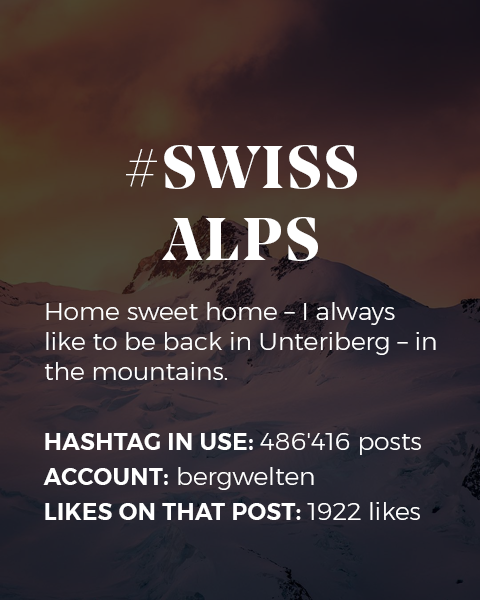
<style>
.page{position:relative;width:480px;height:600px}
.page>*{position:absolute;margin:0}
.t1{font:25px "Montserrat-Light";color:#ffffff}
.t2{font:60px "NoeDisplay-Bold";letter-spacing:0.05em;color:#ffffff;text-transform:uppercase}
.t3{font:23px/35px "Montserrat-SemiBold";letter-spacing:0.02em;color:#ffffff;text-transform:uppercase}
.t4{font:25px/35px "Montserrat-Light";color:#ffffff}
</style>
<div class="page">
<p class="t1" style="left:43px;top:145px;width:393px;height:375px;text-align:center"><span class="t2">#swiss<br>alps<br></span><br>Home sweet home – I always like to be back in Unteriberg – in the mountains. <br><br><span class="t3">Hashtag in Use: </span><span class="t4">486'416 posts<br></span><span class="t3">Account:</span><span class="t4"> bergwelten<br></span><span class="t3">Likes on that post: </span><span class="t4">1922 likes</span></p>
</div>
